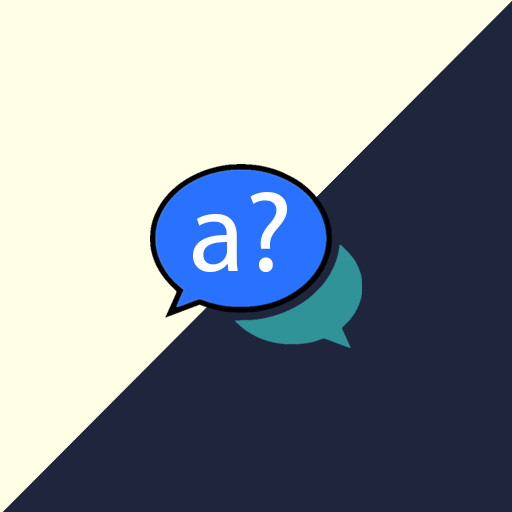
<style>
.page{position:relative;width:512px;height:512px;background:#1f253d}
.page>*{position:absolute;margin:0}
.t1{font:116px "MyriadPro-Regular";color:#ffffff}
</style>
<div class="page">
<p class="t1" style="left:193px;top:192px;width:94px;height:80px">a?</p>
</div>
